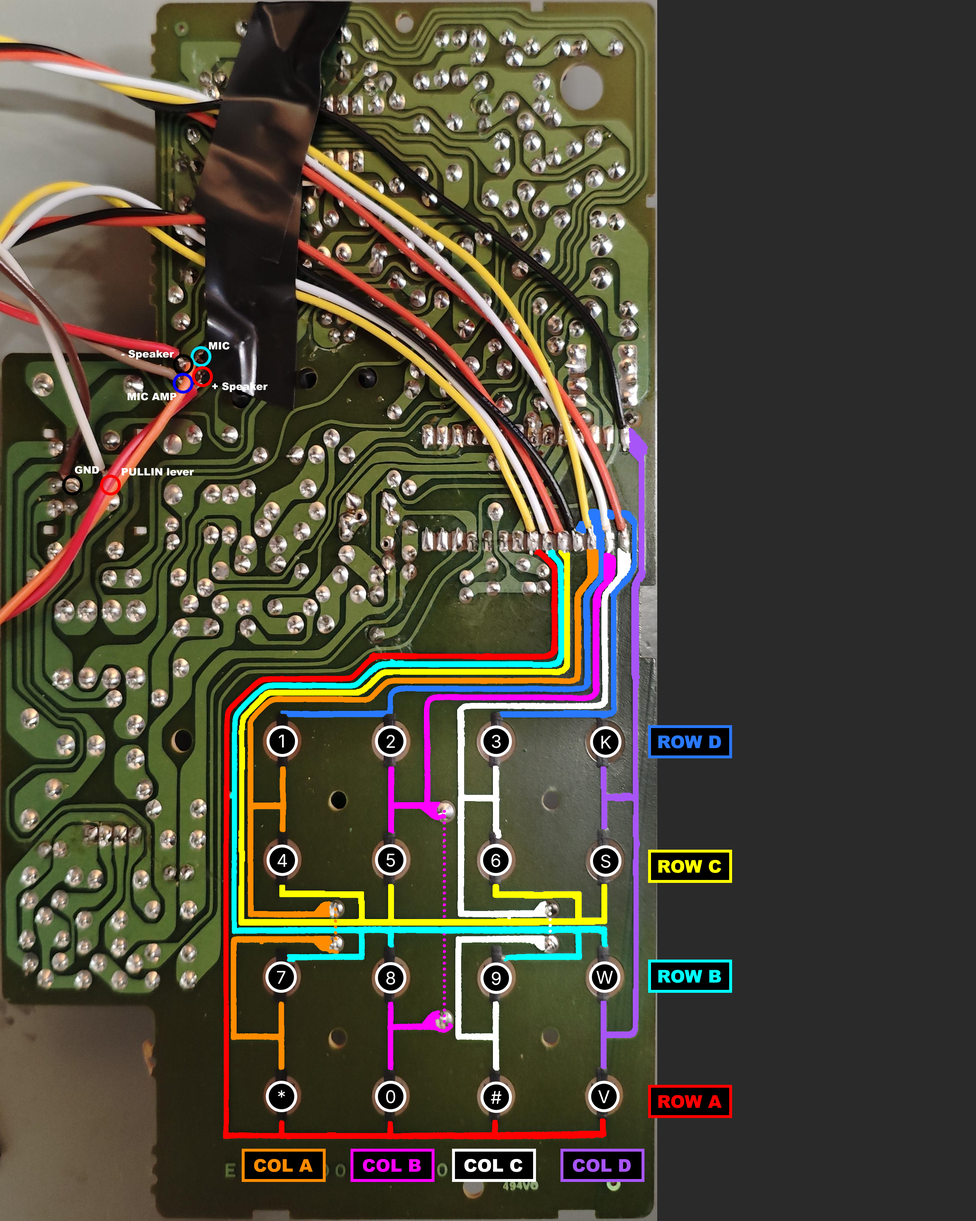
<style>
.page{position:relative;width:976px;height:1221px;background:#2a2a2a}
.page>*{position:absolute;margin:0}
.t1{font:10.2px "Arial-Black";color:#ffffff}
.t2{font:17.5px "Inter-Regular";color:#ffffff}
.t3{font:17.5px "ArialBlack-SemiBold";color:#2979ff}
.t4{font:17.5px "Inter-Regular"}
.t5{font:17.5px "ArialBlack-SemiBold";color:#ffff00}
.t6{font:17.5px "ArialBlack-SemiBold";color:#00ffff}
.t7{font:17.5px "ArialBlack-SemiBold";color:#ff0000}
.t8{font:17.5px "ArialBlack-SemiBold";color:#ff8c00}
.t9{font:17.5px "ArialBlack-SemiBold";color:#ff00ff}
.t10{font:17.5px "ArialBlack-SemiBold";color:#ffffff}
.t11{font:17.5px "ArialBlack-SemiBold";color:#a855f7}
</style>
<div class="page">
<p class="t1" style="left:209px;top:342px;width:21px;height:8px">MIC</p>
<p class="t1" style="left:121px;top:350px;width:54px;height:10px">- Speaker</p>
<p class="t1" style="left:212px;top:382px;width:56px;height:11px">+ Speaker</p>
<p class="t1" style="left:127px;top:393px;width:50px;height:8px">MIC AMP</p>
<p class="t1" style="left:75px;top:466px;width:25px;height:8px">GND</p>
<p class="t1" style="left:121px;top:468px;width:74px;height:8px">PULLIN lever</p>
<p class="t2" style="left:279px;top:735px;width:6px;height:13px">1</p>
<p class="t2" style="left:386px;top:735px;width:10px;height:13px">2</p>
<p class="t2" style="left:492px;top:735px;width:9px;height:14px">3</p>
<p class="t2" style="left:601px;top:736px;width:11px;height:13px">K</p>
<p class="t3" style="left:658px;top:736px;width:64px;height:13px">ROW D</p>
<p class="t2" style="left:277px;top:854px;width:10px;height:14px">4</p>
<p class="t2" style="left:386px;top:854px;width:10px;height:13px">5</p>
<p class="t2" style="left:491px;top:854px;width:10px;height:14px">6</p>
<p class="t4" style="left:492px;top:853px;width:9px;height:14px">3</p>
<p class="t2" style="left:601px;top:855px;width:10px;height:14px">S</p>
<p class="t5" style="left:658px;top:860px;width:64px;height:14px">ROW C</p>
<p class="t2" style="left:276px;top:971px;width:10px;height:14px">7</p>
<p class="t2" style="left:386px;top:972px;width:10px;height:13px">8</p>
<p class="t2" style="left:491px;top:972px;width:10px;height:14px">9</p>
<p class="t2" style="left:596px;top:971px;width:18px;height:14px">W</p>
<p class="t6" style="left:658px;top:970px;width:64px;height:14px">ROW B</p>
<p class="t2" style="left:278px;top:1091px;width:8px;height:7px">*</p>
<p class="t2" style="left:386px;top:1090px;width:10px;height:14px">0</p>
<p class="t2" style="left:491px;top:1091px;width:11px;height:14px">#</p>
<p class="t2" style="left:598px;top:1091px;width:12px;height:13px">V</p>
<p class="t7" style="left:658px;top:1095px;width:64px;height:14px">ROW A</p>
<p class="t8" style="left:253px;top:1159px;width:60px;height:14px">COL A</p>
<p class="t9" style="left:362px;top:1159px;width:59px;height:14px">COL B</p>
<p class="t10" style="left:464px;top:1159px;width:59px;height:14px">COL C</p>
<p class="t11" style="left:572px;top:1159px;width:60px;height:14px">COL D</p>
</div>
